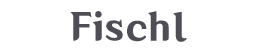
<style>
.page{position:relative;width:256px;height:56px;background:#ffffff}
.page>*{position:absolute;margin:0}
.t1{font:36px "HYWenHei-HEW";color:#4f4e57}
</style>
<div class="page">
<p class="t1" style="left:70px;top:11px;width:117px;height:31px">Fischl</p>
</div>
